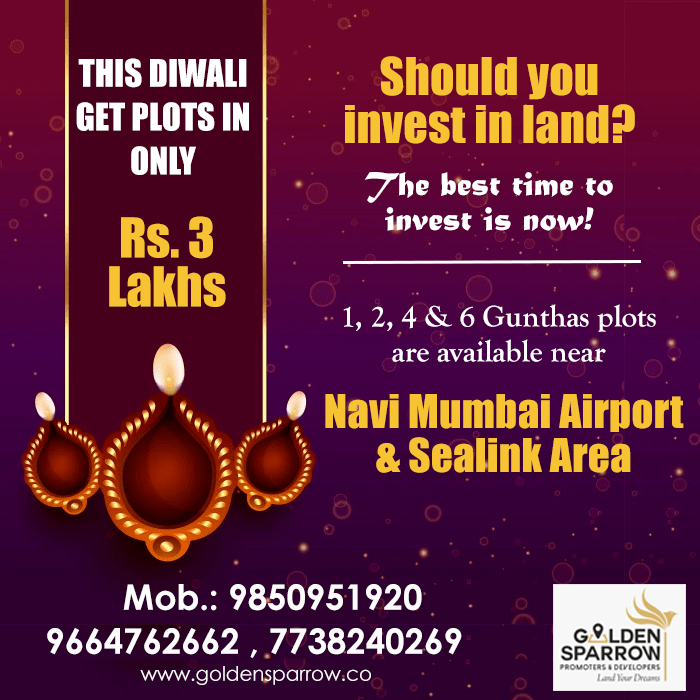
<style>
.page{position:relative;width:700px;height:700px}
.page>*{position:absolute;margin:0}
.t1{font:35px/44px "Impact";letter-spacing:0.001em;color:#ffffff;text-transform:uppercase}
.t2{font:48px/48px "Impact";letter-spacing:0.005em;color:#f8c333}
.t3{font:35px "MaturaMTScriptCapitals";letter-spacing:-0.005em;color:#ffffff}
.t4{font:51px/49px "Impact";letter-spacing:-0.005em;color:#f8c333}
.t5{font:31px/35px "GoudyOldStyleT-Bold";letter-spacing:-0.005em;color:#ffffff}
.t6{font:43px/44px "Impact";letter-spacing:0.005em;color:#f8c333}
.t7{font:35px "CenturyGothic-Bold";letter-spacing:-0.005em;color:#fcfcfc}
.t8{font:20px "CenturyGothic";letter-spacing:-0.005em;color:#fcfcfc}
</style>
<div class="page">
<p class="t1" style="left:76px;top:58px;width:173px;height:117px;text-align:center">This Diwali get plots in Only</p>
<p class="t2" style="left:345px;top:56px;width:290px;height:88px;text-align:center">Should you invest in land?</p>
<p class="t3" style="left:364px;top:172px;width:249px;height:59px">The best time to invest is now!</p>
<p class="t4" style="left:109px;top:216px;width:117px;height:91px;text-align:center">Rs. 3 Lakhs</p>
<p class="t5" style="left:343px;top:304px;width:313px;height:58px;text-align:center">1, 2, 4 &amp; 6 Gunthas plots are available near</p>
<p class="t6" style="left:325px;top:394px;width:359px;height:79px;text-align:center">Navi Mumbai Airport &amp; Sealink Area</p>
<p class="t7" style="left:123px;top:584px;width:299px;height:27px">Mob.: 9850951920</p>
<p class="t7" style="left:47px;top:628px;width:415px;height:30px">9664762662 , 7738240269</p>
<p class="t8" style="left:140px;top:666px;width:231px;height:19px">www.goldensparrow.co</p>
</div>
